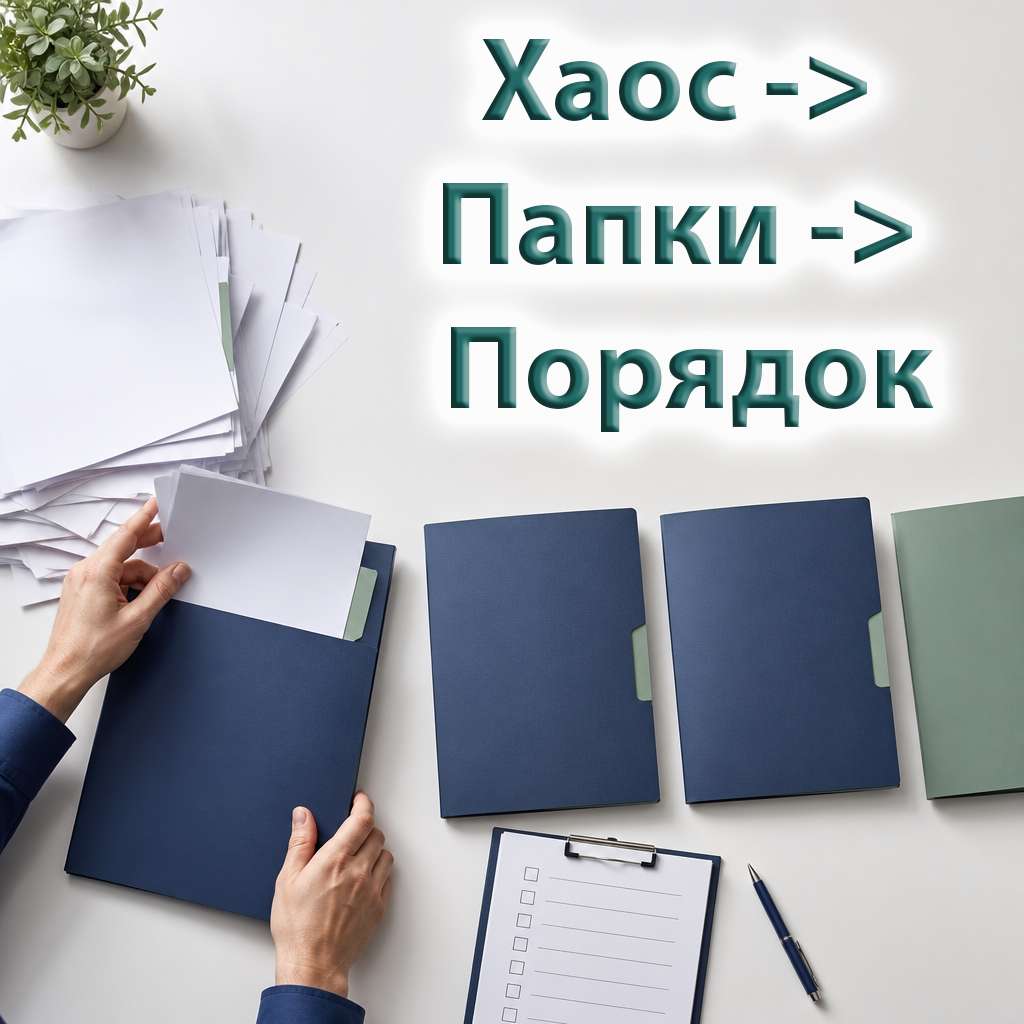
<style>
.page{position:relative;width:1024px;height:1024px}
.page>*{position:absolute;margin:0}
.t1{font:120px "MyriadPro-Bold"}
</style>
<div class="page">
<p class="t1" style="left:443px;top:39px;width:491px;height:393px;text-align:center">Хаос -&gt;<br> Папки -&gt; <br> Порядок</p>
</div>
